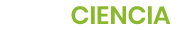
<style>
.page{position:relative;width:194px;height:30px;background:#ffffff}
.page>*{position:absolute;margin:0}
.t1{font:25px "Poppins-SemiBold";color:#8ab92d}
.t2{font:25px "Poppins-SemiBold";color:#ffffff}
</style>
<div class="page">
<p class="t1" style="left:22px;top:6px;width:149px;height:19px"><span class="t2">PRO</span>CIENCIA</p>
</div>
